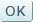
<style>
.page{position:relative;width:33px;height:22px}
.page>*{position:absolute;margin:0}
.t1{font:13px "ArialMT";letter-spacing:0.099em;color:#345a70}
</style>
<div class="page">
<p class="t1" style="left:5px;top:6px;width:21px;height:10px">OK</p>
</div>
